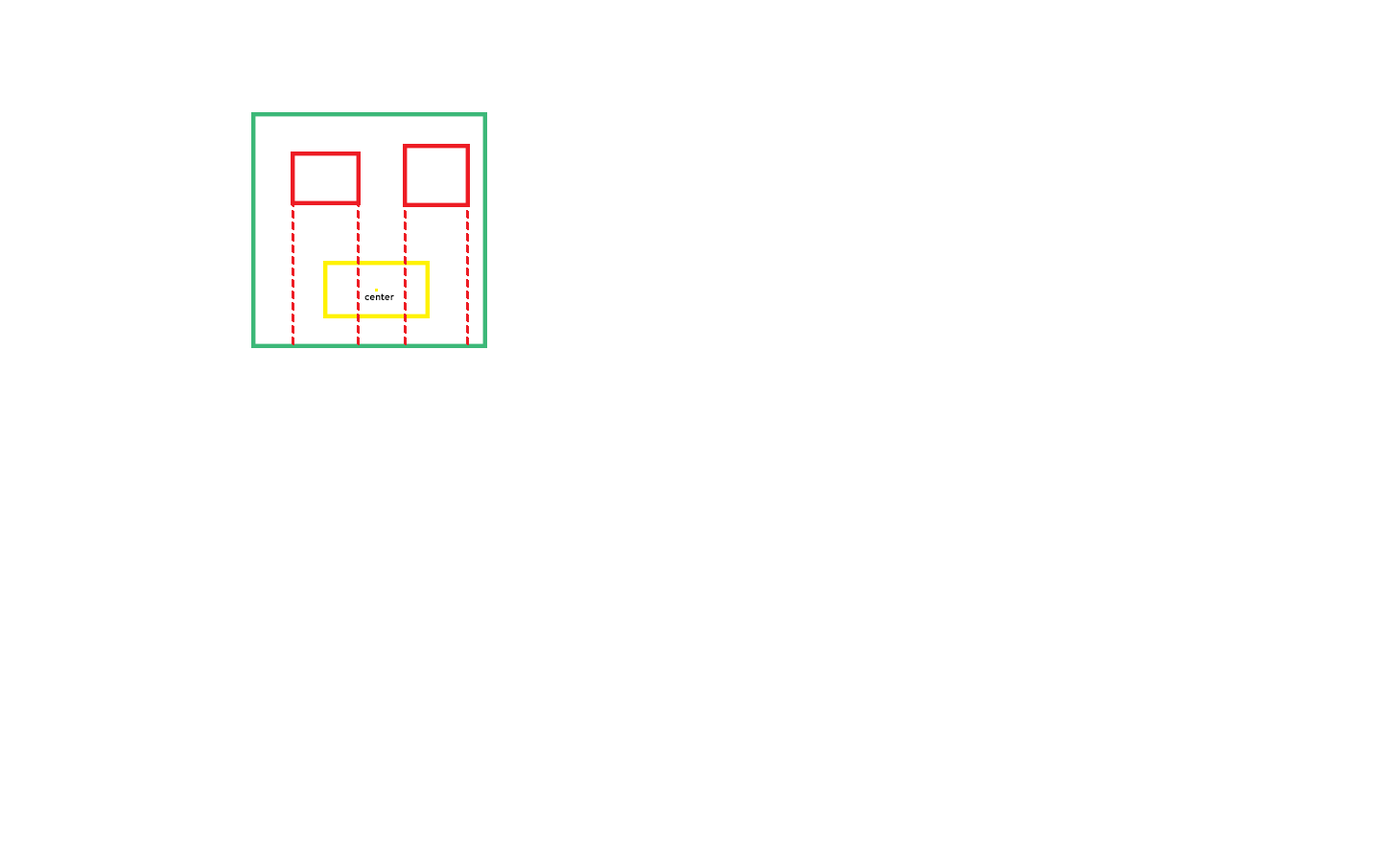
<style>
.page{position:relative;width:1381px;height:863px;background:#ffffff}
.page>*{position:absolute;margin:0}
.t1{font:9.6px "TrebuchetMS-Bold";color:#000000}
</style>
<div class="page">
<p class="t1" style="left:365px;top:294px;width:29px;height:6px">center</p>
</div>
